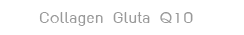
<style>
.page{position:relative;width:244px;height:35px;background:#ffffff}
.page>*{position:absolute;margin:0}
.t1{font:22px "THK2DJuly8-Bold";color:#999999}
</style>
<div class="page">
<p class="t1" style="left:39px;top:12px;width:154px;height:14px">Collagen Gluta Q10</p>
</div>
